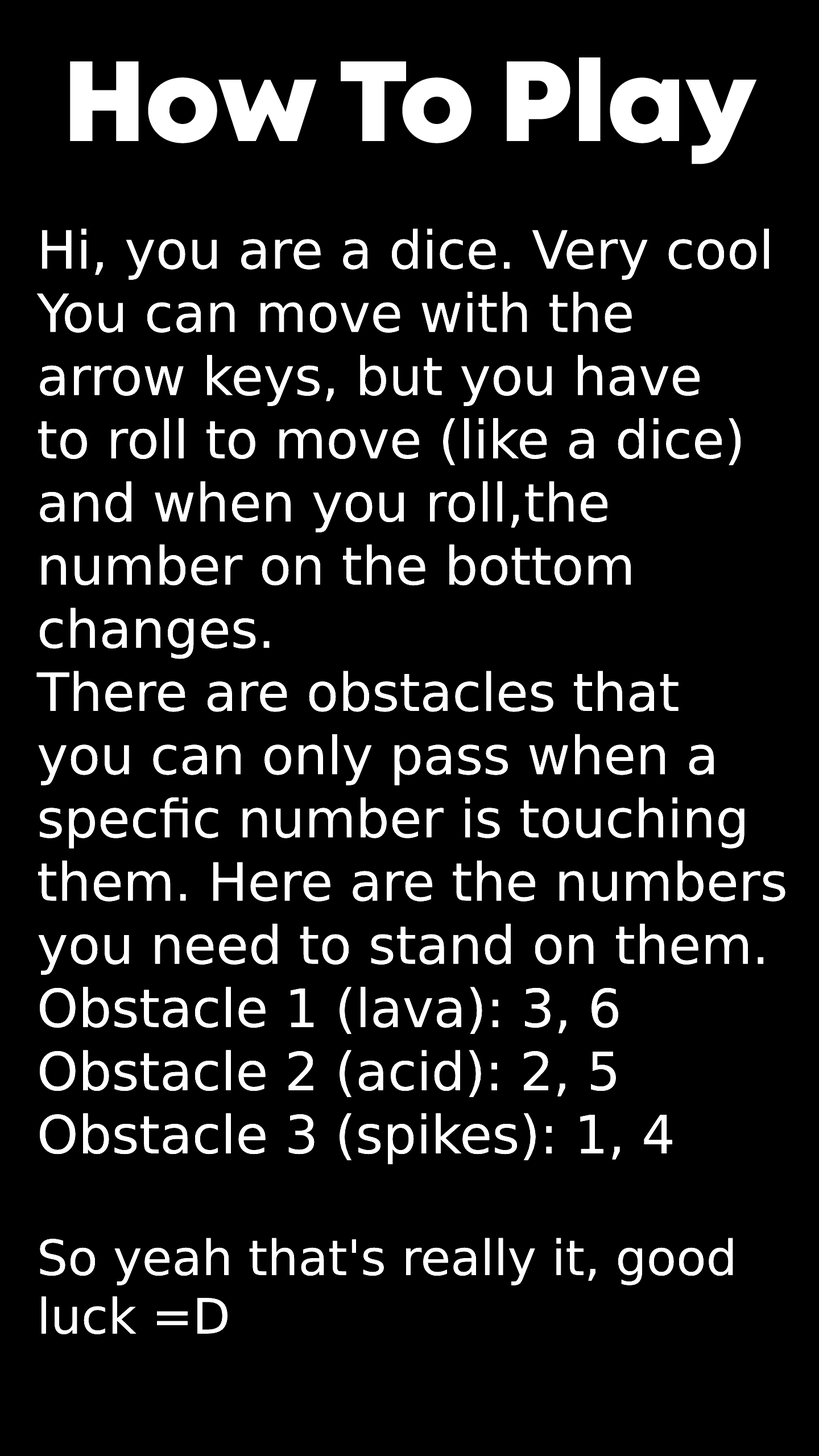
<style>
.page{position:relative;width:819px;height:1456px;background:#000000}
.page>*{position:absolute;margin:0}
.t1{font:113.7px "Mont-HeavyDEMO";color:#ffffff}
.t2{font:52.7px "Mont-HeavyDEMO";color:#ffffff}
.t3{font:48.8px "Mont-HeavyDEMO";color:#ffffff}
</style>
<div class="page">
<p class="t1" style="left:70px;top:57px;width:687px;height:107px">How To Play</p>
<p class="t2" style="left:36px;top:229px;width:749px;height:1105px">Hi, you are a dice. Very cool<br>You can move with the <br>arrow keys, but you have<br>to roll to move (like a dice)<br>and when you roll,the <br>number on the bottom<br>changes.<br>There are obstacles that<br>you can only pass when a<br>specfic number is touching<br>them. Here are the numbers<br>you need to stand on them.<br>Obstacle 1 (lava): 3, 6<br>Obstacle 2 (acid): 2, 5<br>Obstacle 3 (spikes): 1, 4 <br><br><span class="t3">S</span><span class="t3">o yeah that's really it, good<br>luck </span><span class="t3">=D</span></p>
</div>
